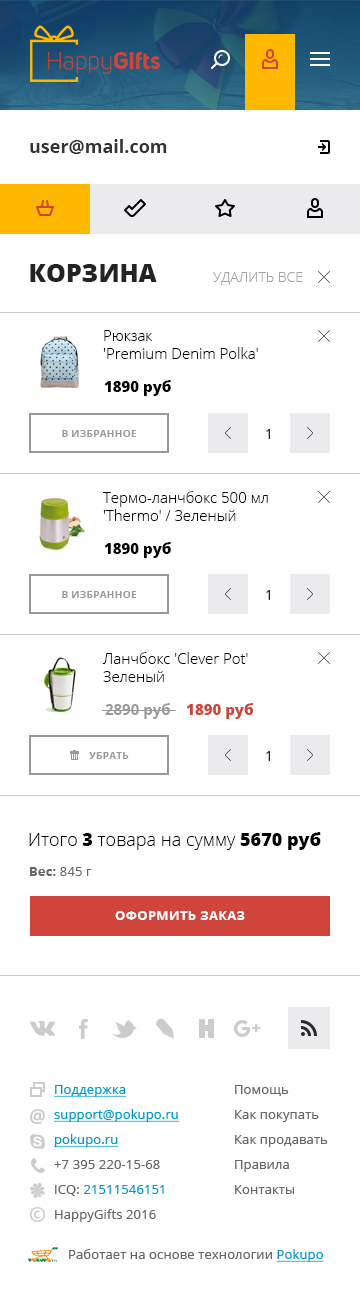
<style>
.page{position:relative;width:360px;height:1289px;background:#ffffff}
.page>*{position:absolute;margin:0}
.t1{font:18px "OpenSans-Bold";color:#333333}
.t2{font:25px "OpenSans-Extrabold";color:#232323;text-transform:uppercase}
.t3{font:14px "OpenSans-Light";color:#a3a3a3;text-transform:uppercase}
.t4{font:15px/18px "OpenSans-Light";color:#000000}
.t5{font:15px "OpenSans-Extrabold";color:#000000}
.t6{font:10px "OpenSans-Bold";letter-spacing:0.025em;color:#999999;text-transform:uppercase}
.t7{font:14px "OpenSans";color:#28282c}
.t8{font:15px "OpenSans-Bold";color:#999999}
.t9{font:15px "OpenSans-Extrabold";color:#cf453c}
.t10{font:18px "OpenSans-Light";color:#000000}
.t11{font:18px "OpenSans-Extrabold";color:#000000}
.t12{font:13px "OpenSans";letter-spacing:0.01em;color:#666666}
.t13{font:13px "OpenSans-Bold";letter-spacing:0.01em;color:#666666}
.t14{font:13px "OpenSans-Bold";letter-spacing:0.025em;color:#ffffff;text-transform:uppercase}
</style>
<div class="page">
<p class="t1" style="left:30px;top:139px;width:137px;height:15px">user@mail.com</p>
<p class="t2" style="left:30px;top:264px;width:127px;height:18px">Корзина</p>
<p class="t3" style="left:213px;top:272px;width:90px;height:13px">Удалить все</p>
<p class="t4" style="left:103px;top:330px;width:155px;height:29px">Рюкзак<br>'Premium Denim Polka'</p>
<p class="t5" style="left:104px;top:380px;width:67px;height:16px">1890 руб</p>
<p class="t6" style="left:62px;top:430px;width:75px;height:7px">в избранное</p>
<p class="t7" style="left:266px;top:429px;width:4px;height:10px">1</p>
<p class="t4" style="left:103px;top:491px;width:165px;height:30px">Термо-ланчбокс 500 мл<br>'Thermo' / Зеленый</p>
<p class="t5" style="left:104px;top:542px;width:67px;height:16px">1890 руб</p>
<p class="t6" style="left:62px;top:591px;width:75px;height:7px">в избранное</p>
<p class="t7" style="left:266px;top:590px;width:4px;height:10px">1</p>
<p class="t4" style="left:102px;top:652px;width:146px;height:30px">Ланчбокс 'Clever Pot'<br>Зеленый</p>
<p class="t8" style="left:105px;top:703px;width:149px;height:16px">2890 руб    <span class="t9">1890 руб</span></p>
<p class="t6" style="left:89px;top:752px;width:40px;height:7px">Убрать</p>
<p class="t7" style="left:266px;top:751px;width:4px;height:10px">1</p>
<p class="t10" style="left:29px;top:832px;width:292px;height:18px">Итого <span class="t11">3</span> товара на сумму <span class="t11">5670 руб</span></p>
<p class="t12" style="left:30px;top:867px;width:62px;height:9px"><span class="t13">Вес:</span> 845 г</p>
<p class="t14" style="left:115px;top:911px;width:130px;height:9px">Оформить заказ</p>
</div>
